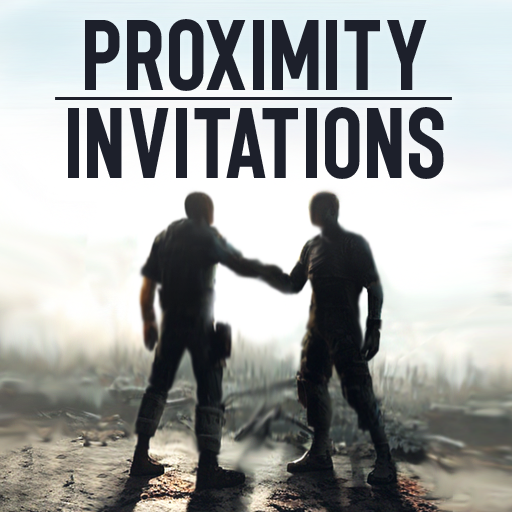
<style>
.page{position:relative;width:512px;height:512px}
.page>*{position:absolute;margin:0}
.t1{font:100px "RoughMotion";color:#1d202b}
</style>
<div class="page">
<p class="t1" style="left:85px;top:19px;width:342px;height:72px">PROXIMITY</p>
<p class="t1" style="left:68px;top:107px;width:376px;height:72px">iNVITATIONS</p>
</div>
